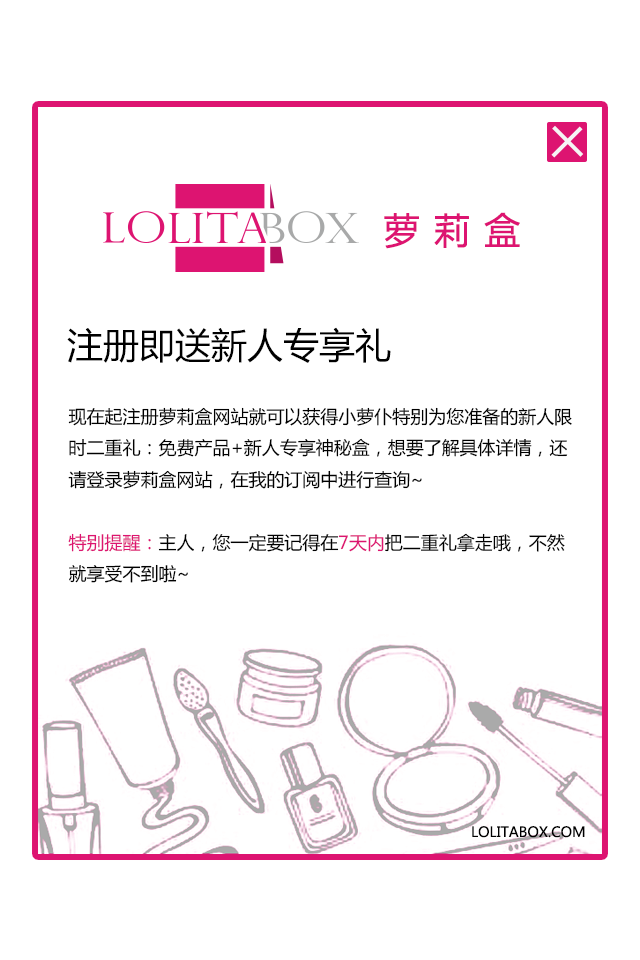
<style>
.page{position:relative;width:640px;height:960px;background:#ffffff}
.page>*{position:absolute;margin:0}
.t1{font:36px "MicrosoftYaHei";letter-spacing:0.025em;color:#dd1471;font-weight:bold}
.t2{font:36px "MicrosoftYaHei";color:#000000}
.t3{font:18px "MicrosoftYaHei";color:#000000}
.t4{font:18px "MicrosoftYaHei";color:#dd1471}
.t5{font:14px "MicrosoftYaHei";color:#000000}
</style>
<div class="page">
<p class="t1" style="left:384px;top:212px;width:136px;height:37px">萝 莉 盒</p>
<p class="t2" style="left:67px;top:327px;width:324px;height:36px">注册即送新人专享礼</p>
<p class="t3" style="left:68px;top:407px;width:504px;height:176px">现在起注册萝莉盒网站就可以获得小萝仆特别为您准备的新人限<br>时二重礼：免费产品+新人专享神秘盒，想要了解具体详情，还<br>请登录萝莉盒网站，在我的订阅中进行查询~<br><br><span class="t4">特别提醒：</span>主人，您一定要记得在<span class="t4">7天内</span>把二重礼拿走哦，不然<br>就享受不到啦~</p>
<p class="t5" style="left:472px;top:826px;width:113px;height:12px">LOLITABOX.COM</p>
</div>
